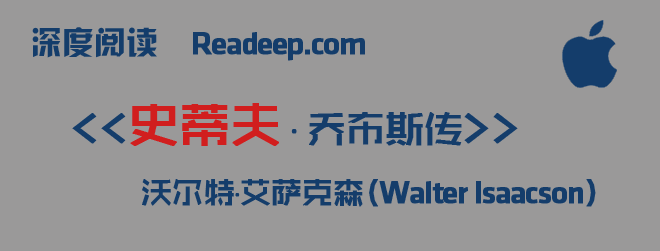
<style>
.page{position:relative;width:660px;height:251px;background:#9a9999}
.page>*{position:absolute;margin:0}
.t1{font:32px "HYk2gj";color:#143d6b}
.t2{font:32px "KlavikaMedium-OSF";letter-spacing:-0.05em;color:#143d6b;font-weight:bold}
.t3{font:40px "ZHSRXT--GBK1-0";letter-spacing:-0.05em;color:#143d6b;font-weight:bold}
.t4{font:52px "ZHSRXT--GBK1-0";letter-spacing:-0.05em;color:#d11e1e;font-weight:bold}
.t5{font:32px "ZHSRXT--GBK1-0";letter-spacing:-0.05em;color:#143d6b;font-weight:bold}
</style>
<div class="page">
<p class="t1" style="left:32px;top:27px;width:125px;height:31px">深度阅读</p>
<p class="t2" style="left:193px;top:32px;width:172px;height:29px">Readeep.com</p>
<p class="t3" style="left:72px;top:103px;width:446px;height:43px">&lt;&lt;<span class="t4">史蒂夫</span> · 乔布斯传&gt;&gt;</p>
<p class="t2" style="left:142px;top:179px;width:454px;height:28px"><span class="t5">沃尔特·艾萨克森(</span>Walter Isaacson<span class="t5">)</span></p>
</div>
